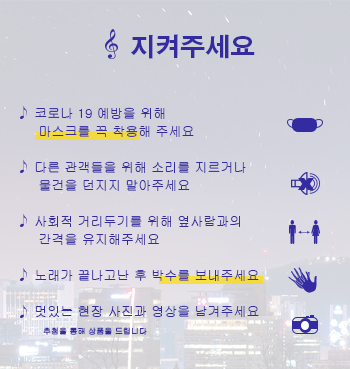
<style>
.page{position:relative;width:350px;height:369px}
.page>*{position:absolute;margin:0}
.t1{font:25px "AdobeGothicStd-Bold";color:#352ba0}
.t2{font:13px/18px "Gulim";color:#352ba0}
.t3{font:8px/18px "Gulim";color:#352ba0}
</style>
<div class="page">
<p class="t1" style="left:130px;top:34px;width:125px;height:25px">지켜주세요</p>
<p class="t2" style="left:35px;top:107px;width:224px;height:228px">코로나 19 예방을 위해 <br>  마스크를 꼭 착용해 주세요<br><br> 다른 관객들을 위해 소리를 지르거나 <br>  물건을 던지지 말아주세요<br><br> 사회적 거리두기를 위해 옆사람과의 <br>  간격을 유지해주세요<br><br> 노래가 끝나고난 후 박수를 보내주세요<br><br> 멋있는 현장 사진과 영상을 남겨주세요<br>   <span class="t3">추첨을 통해 상품을 드립니다</span></p>
</div>
